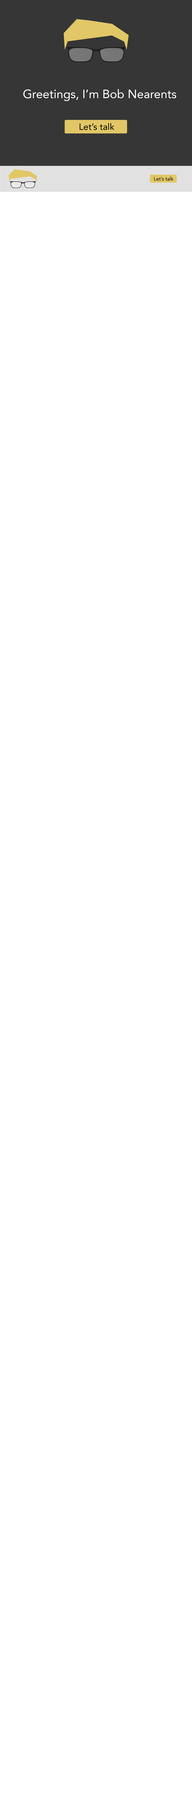
<style>
.page{position:relative;width:192px;height:1800px;background:#ffffff}
.page>*{position:absolute;margin:0}
.t1{font:12px "Avenir-Roman";color:#ffffff}
.t2{font:9px "Avenir-Roman";color:#000000}
.t3{font:5px "Avenir-Roman";color:#000000}
</style>
<div class="page">
<p class="t1" style="left:23px;top:89px;width:153px;height:12px">Greetings, I’m Bob Nearents</p>
<p class="t2" style="left:80px;top:123px;width:34px;height:7px">Let’s talk</p>
<p class="t3" style="left:154px;top:177px;width:19px;height:4px">Let’s talk</p>
</div>
